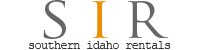
<style>
.page{position:relative;width:200px;height:50px;background:#ffffff}
.page>*{position:absolute;margin:0}
.t1{font:49px "TrajanPro-Regular";letter-spacing:0.28em;color:#666666;scale:1.18 1}
.t2{font:49px "TrajanPro-Regular";letter-spacing:0.18em;color:#ea8e00;scale:1.18 1}
.t3{font:49px "TrajanPro-Regular";letter-spacing:0.18em;color:#666666;scale:1.09 1}
.t4{font:12px "CourierNewPSMT";letter-spacing:-0.06em;color:#333333}
</style>
<div class="page">
<p class="t1" style="left:43px;top:0px;width:126px;height:39px">S<span class="t2">I</span><span class="t3">R</span></p>
<p class="t4" style="left:29px;top:41px;width:142px;height:8px">southern idaho rentals</p>
</div>
